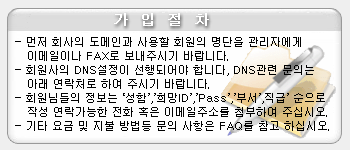
<style>
.page{position:relative;width:350px;height:150px;background:#fefefe}
.page>*{position:absolute;margin:0}
.t1{font:14px "Dotum";color:#ffffff;font-weight:bold}
.t2{font:11px/14px "Dotum";color:#000000}
.t3{font:12px/18px "Dotum";color:#000000}
.t4{font:11px/14px "Dotum";color:#000000;font-weight:bold}
</style>
<div class="page">
<p class="t1" style="left:114px;top:13px;width:95px;height:13px">가  입  절  차</p>
<p class="t2" style="left:15px;top:37px;width:314px;height:94px"><span class="t3">  <br></span><span class="t4">-</span> 먼저 회사의 도메인과 사용할 회원의 명단을 관리자에게 <br>   이메일이나 FAX로 보내주시기 바랍니다.<br><span class="t4">-</span> 회원사의 DNS설정이 선행되어야 합니다, DNS관련 문의는 <br>   아래 연락처로 하여 주시기 바랍니다.   <br><span class="t4">-</span> 회원님들의 정보는 ‘성함’,’희망ID’,’Pass’,’부서’,직급’ 순으로<br>   작성 연락가능한 전화 혹은 이메일주소를 첨부하여 주십시오.<br><span class="t4">-</span> 기타 요금 및 지불 방법등 문의 사항은 FAQ를 참고 하십시오.</p>
</div>
